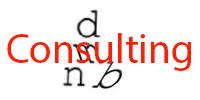
<style>
.page{position:relative;width:200px;height:100px;background:#ffffff}
.page>*{position:absolute;margin:0}
.t1{font:41.7px "MyriadPro-Regular";color:#ff1e00}
</style>
<div class="page">
<p class="t1" style="left:7px;top:33px;width:185px;height:38px">Consulting</p>
</div>
